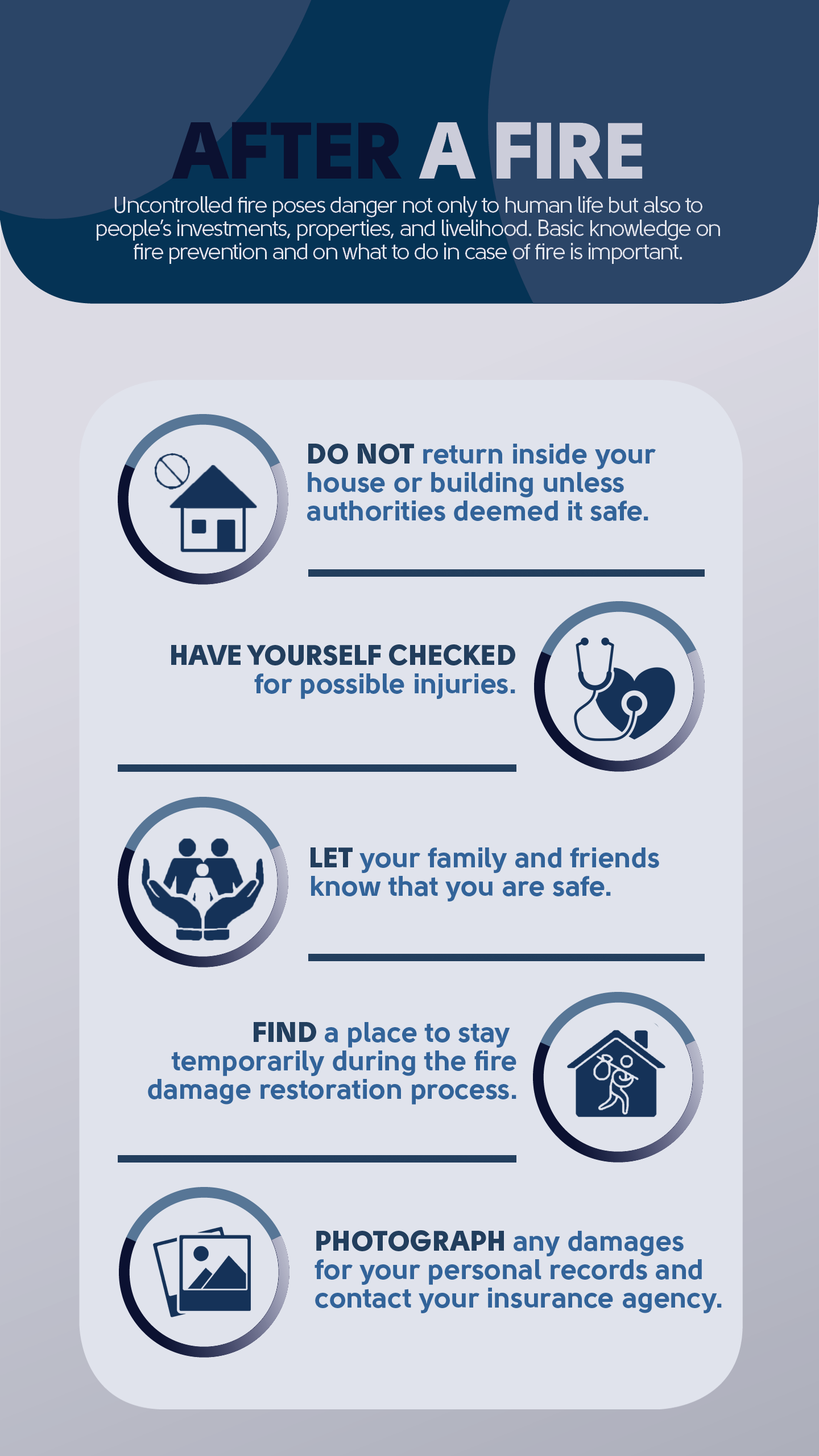
<style>
.page{position:relative;width:819px;height:1456px;background:#e0e3ec}
.page>*{position:absolute;margin:0}
.t1{font:28.4px/28.4px "Solomon-Sans-Bold";color:#326399}
.t2{font:28.4px/28.4px "Solomon-Sans-Black";color:#223e5d}
</style>
<div class="page">
<p class="t1" style="left:307px;top:444px;width:349px;height:77px"><span class="t2">DO NOT </span>return inside your<br>house or building unless<br>authorities deemed it safe.</p>
<p class="t1" style="left:171px;top:644px;width:344px;height:55px;text-align:right"><span class="t2">HAVE YOURSELF CHECKED<br></span>for possible injuries.</p>
<p class="t1" style="left:311px;top:847px;width:348px;height:54px"><span class="t2">LET </span>your family and friends<br>know that you are safe.</p>
<p class="t1" style="left:148px;top:1022px;width:368px;height:82px;text-align:right"><span class="t2">FIND </span>a place to stay <br>temporarily during the fire<br>damage restoration process.</p>
<p class="t1" style="left:315px;top:1230px;width:407px;height:83px"><span class="t2">PHOTOGRAPH </span>any damages<br>for your personal records and<br>contact your insurance agency.</p>
</div>
